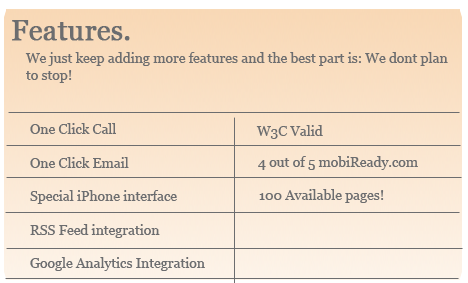
<style>
.page{position:relative;width:468px;height:283px}
.page>*{position:absolute;margin:0}
.t1{font:28px "Georgia";letter-spacing:-0.005em;color:#6c6d6f;font-weight:bold}
.t2{font:14px "Georgia";letter-spacing:-0.005em;color:#6c6d6f}
</style>
<div class="page">
<p class="t1" style="left:12px;top:20px;width:118px;height:21px">Features.</p>
<p class="t2" style="left:25px;top:52px;width:423px;height:31px">We just keep adding more features and the best part is: We dont plan<br>to stop!</p>
<p class="t2" style="left:30px;top:123px;width:175px;height:148px">One Click Call<br><br>One Click Email<br><br>Special iPhone interface<br><br>RSS Feed integration<br><br>Google Analytics Integration</p>
<p class="t2" style="left:256px;top:125px;width:67px;height:14px">W3C Valid</p>
<p class="t2" style="left:258px;top:156px;width:160px;height:14px">4 out of 5 mobiReady.com</p>
<p class="t2" style="left:259px;top:189px;width:125px;height:14px">100 Available pages!</p>
</div>
